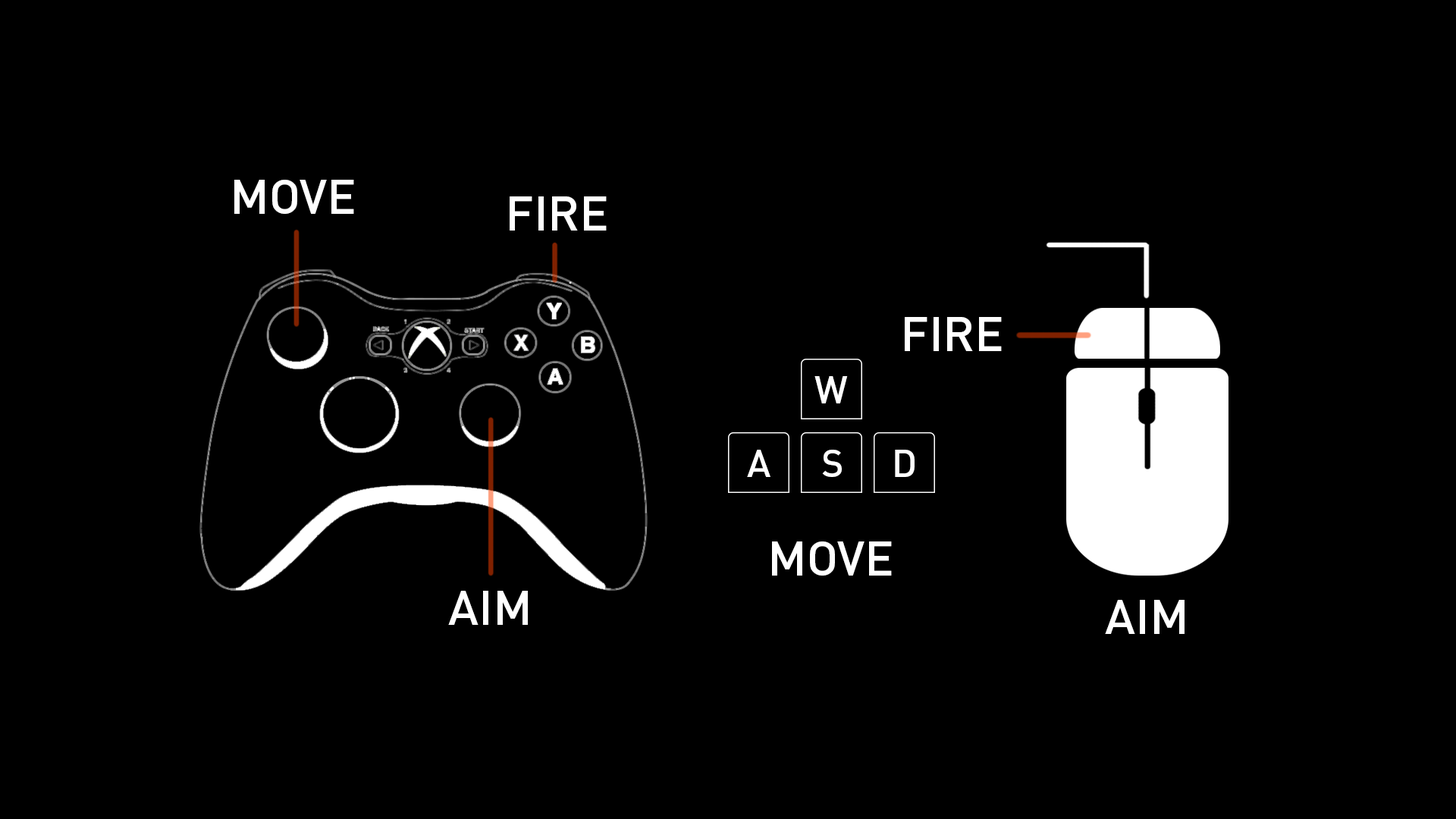
<style>
.page{position:relative;width:1456px;height:819px;background:#000000}
.page>*{position:absolute;margin:0}
.t1{font:48.4px "DINPro-Medium";color:#ffffff}
.t2{font:37.8px "DINPro-Medium";color:#ffffff}
</style>
<div class="page">
<p class="t1" style="left:234px;top:180px;width:120px;height:34px">MOVE</p>
<p class="t1" style="left:510px;top:196px;width:97px;height:35px">FIRE</p>
<p class="t1" style="left:905px;top:317px;width:97px;height:34px">FIRE</p>
<p class="t2" style="left:814px;top:376px;width:34px;height:27px">W</p>
<p class="t2" style="left:747px;top:450px;width:23px;height:27px">A</p>
<p class="t2" style="left:822px;top:450px;width:20px;height:27px">S</p>
<p class="t2" style="left:895px;top:450px;width:20px;height:27px">D</p>
<p class="t1" style="left:772px;top:541px;width:120px;height:35px">MOVE</p>
<p class="t1" style="left:448px;top:591px;width:80px;height:34px">AIM</p>
<p class="t1" style="left:1105px;top:600px;width:80px;height:34px">AIM</p>
</div>
